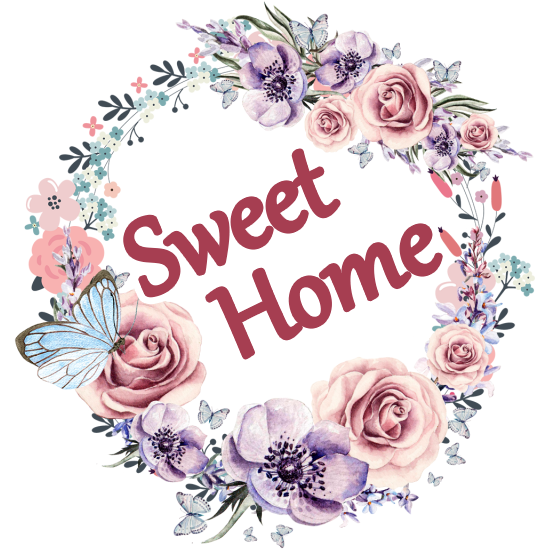
<style>
.page{position:relative;width:549px;height:549px;background:#ffffff}
.page>*{position:absolute;margin:0}
.t1{font:125.8px "Gabriola";color:#a63e51}
.t2{font:100.8px "Gabriola";color:#a63e51}
</style>
<div class="page">
<p class="t1" style="left:126px;top:151px;width:212px;height:144px;rotate:-25deg"><span class="t2">     </span>Sweet</p>
<p class="t1" style="left:208px;top:226px;width:232px;height:131px;rotate:-25deg"><span class="t2">     </span> Home</p>
</div>
